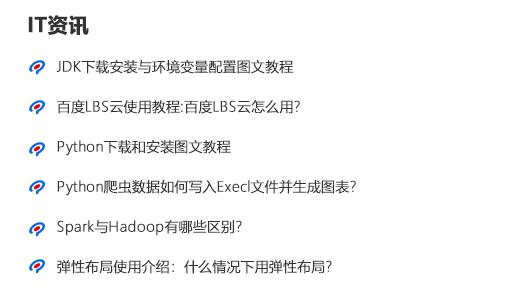
<style>
.page{position:relative;width:520px;height:300px;background:#ffffff}
.page>*{position:absolute;margin:0}
.t1{font:20px "MicrosoftYaHei-Bold";letter-spacing:0.01em;color:#333333;font-weight:bold}
.t2{font:14px/40px "MicrosoftYaHeiLight";letter-spacing:0.01em;color:#333333;font-weight:bold}
</style>
<div class="page">
<p class="t1" style="left:28px;top:15px;width:61px;height:20px">IT资讯</p>
<p class="t2" style="left:56px;top:60px;width:300px;height:214px">JDK下载安装与环境变量配置图文教程<br>百度LBS云使用教程:百度LBS云怎么用？<br>Python下载和安装图文教程<br>Python爬虫数据如何写入Execl文件并生成图表？<br>Spark与Hadoop有哪些区别？<br>弹性布局使用介绍：什么情况下用弹性布局?</p>
</div>
